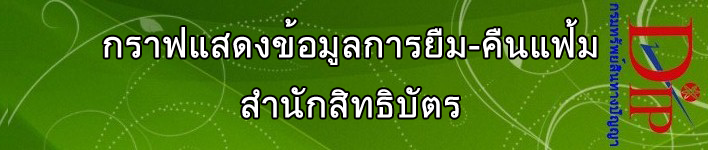
<style>
.page{position:relative;width:708px;height:150px}
.page>*{position:absolute;margin:0}
.t1{font:36px/60px "DokChampa";color:#ffffff;text-transform:uppercase;font-weight:bold}
</style>
<div class="page">
<p class="t1" style="left:103px;top:18px;width:494px;height:100px;text-align:center">กราฟแสดงข้อมูลการยืม-คืนแฟ้ม<br>สำนักสิทธิบัตร</p>
</div>
